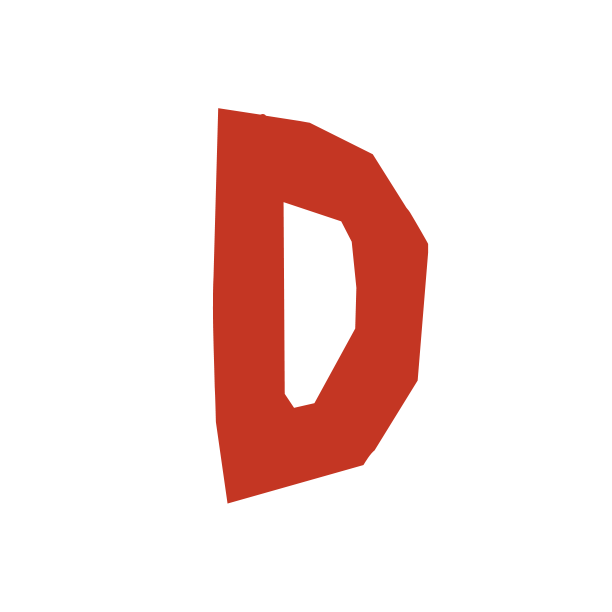
<style>
.page{position:relative;width:612px;height:612px;background:#ffffff}
.page>*{position:absolute;margin:0}
.t1{font:583px "DKSnippitySnap";letter-spacing:0.04em;color:#c43623}
</style>
<div class="page">
<p class="t1" style="left:212px;top:108px;width:217px;height:396px">D</p>
</div>
